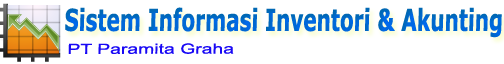
<style>
.page{position:relative;width:504px;height:64px;background:#ffffff}
.page>*{position:absolute;margin:0}
.t1{font:30.3px "Verdana-Bold";color:#0068d1;scale:0.66 1}
.t2{font:14px "ArialMT";color:#1808f5;scale:1.38 1}
</style>
<div class="page">
<p class="t1" style="left:65px;top:7px;width:437px;height:31px">Sistem Informasi Inventori &amp; Akunting</p>
<p class="t2" style="left:68px;top:43px;width:166px;height:11px">PT Paramita Graha</p>
</div>
